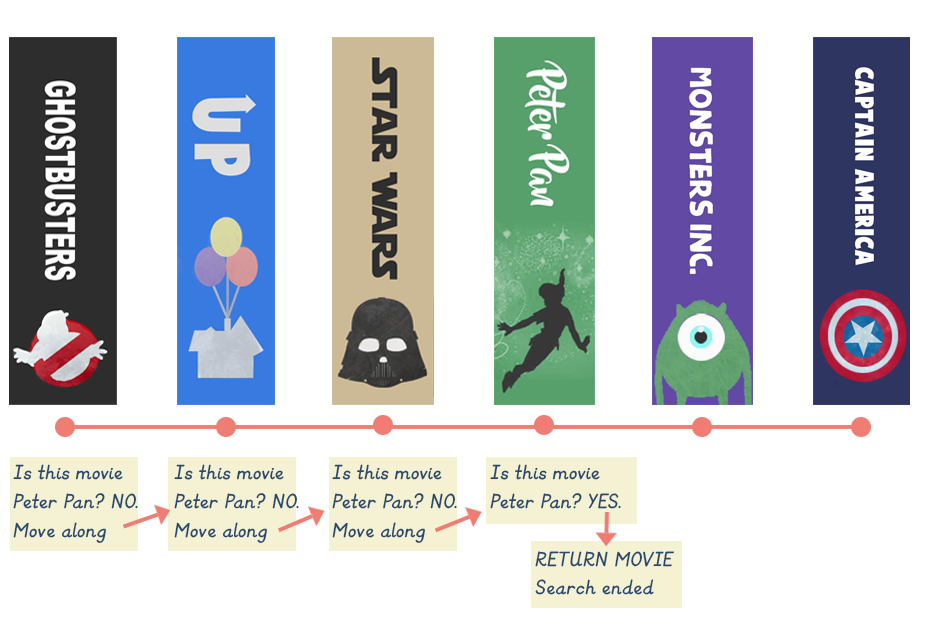
<style>
.page{position:relative;width:925px;height:620px;background:#ffffff}
.page>*{position:absolute;margin:0}
.t1{font:24px "KGPrimaryItalics";color:#28486e}
</style>
<div class="page">
<p class="t1" style="left:13px;top:464px;width:125px;height:79px">Is this movie <br>Peter Pan? NO.<br>Move along</p>
<p class="t1" style="left:174px;top:464px;width:125px;height:79px">Is this movie <br>Peter Pan? NO.<br>Move along</p>
<p class="t1" style="left:332px;top:464px;width:125px;height:79px">Is this movie <br>Peter Pan? NO.<br>Move along</p>
<p class="t1" style="left:490px;top:464px;width:131px;height:45px">Is this movie <br>Peter Pan? YES.</p>
<p class="t1" style="left:535px;top:551px;width:139px;height:44px">RETURN MOVIE<br>Search ended</p>
</div>
